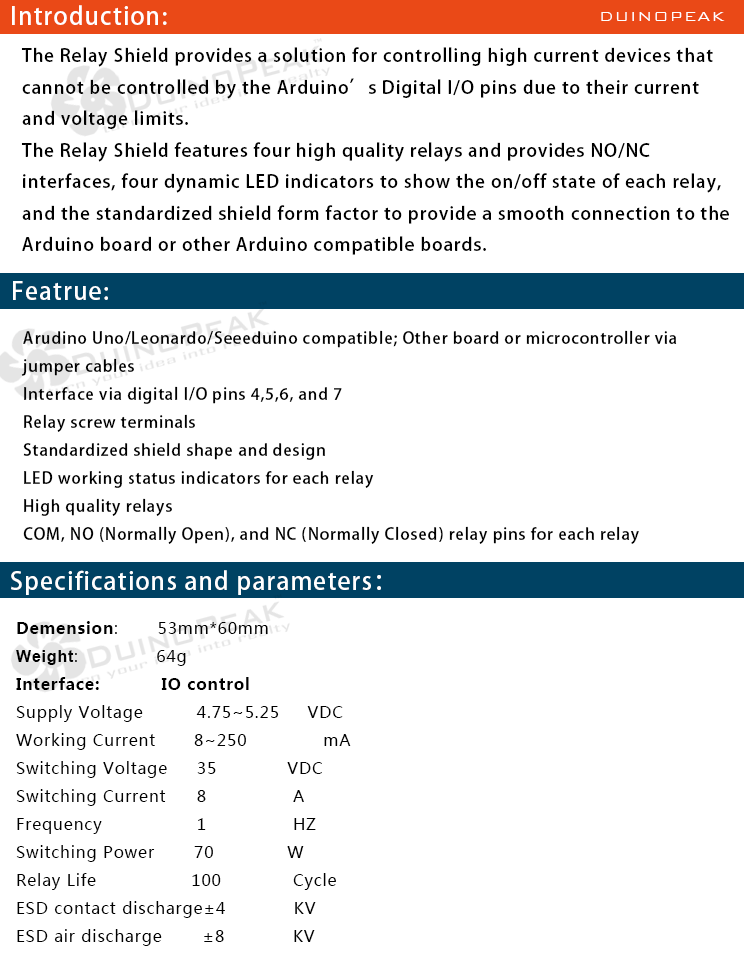
<style>
.page{position:relative;width:744px;height:962px;background:#ffffff}
.page>*{position:absolute;margin:0}
.t1{font:24px "AdobeHeitiStd-Regular";letter-spacing:0.05em;color:#ffffff}
.t2{font:18px "BankGothicBT-Light";letter-spacing:0.05em;color:#ffffff}
.t3{font:18px "AdobeHeitiStd-Regular";letter-spacing:0.05em;color:#000000}
.t4{font:16px "AdobeHeitiStd-Regular";letter-spacing:0.05em;color:#000000}
.t5{font:16px "MicrosoftYaHei";letter-spacing:0.05em;color:#000000}
.t6{font:16px "MicrosoftYaHei-Bold";letter-spacing:0.05em;color:#000000}
.t7{font:16px "Arial-BoldMT";letter-spacing:0.05em;color:#000000}
</style>
<div class="page">
<p class="t1" style="left:12px;top:5px;width:155px;height:20px">Introduction:</p>
<p class="t2" style="left:601px;top:12px;width:124px;height:9px">DUINOPEAK</p>
<p class="t3" style="left:21px;top:47px;width:708px;height:208px">The Relay Shield provides a solution for controlling high current devices that <br>cannot be controlled by the Arduino’s Digital I/O pins due to their current <br>and voltage limits.<br>The Relay Shield features four high quality relays and provides NO/NC <br>interfaces, four dynamic LED indicators to show the on/off state of each relay, <br>and the standardized shield form factor to provide a smooth connection to the <br>Arduino board or other Arduino compatible boards.</p>
<p class="t1" style="left:13px;top:281px;width:95px;height:19px">Featrue:</p>
<p class="t4" style="left:21px;top:330px;width:656px;height:214px">Arudino Uno/Leonardo/Seeeduino compatible; Other board or microcontroller via <br>jumper cables<br>Interface via digital I/O pins 4,5,6, and 7<br>Relay screw terminals<br>Standardized shield shape and design<br>LED working status indicators for each relay<br>High quality relays<br>COM, NO (Normally Open), and NC (Normally Closed) relay pins for each relay</p>
<p class="t1" style="left:11px;top:570px;width:370px;height:25px">Specifications and parameters：</p>
<p class="t5" style="left:16px;top:621px;width:335px;height:325px"><span class="t6">Demension</span>:       53mm*60mm<br><span class="t7">Weight</span>:              64g<br><span class="t6">Interface:           IO control<br></span>Supply Voltage     4.75~5.25     VDC<br>Working Current       8~250           mA<br>Switching Voltage 35           VDC<br>Switching Current 8            A<br>Frequency              1            HZ<br>Switching Power       70           W<br>Relay Life             100            Cycle<br>ESD contact discharge±4            KV<br>ESD air discharge  ±8            KV</p>
</div>
